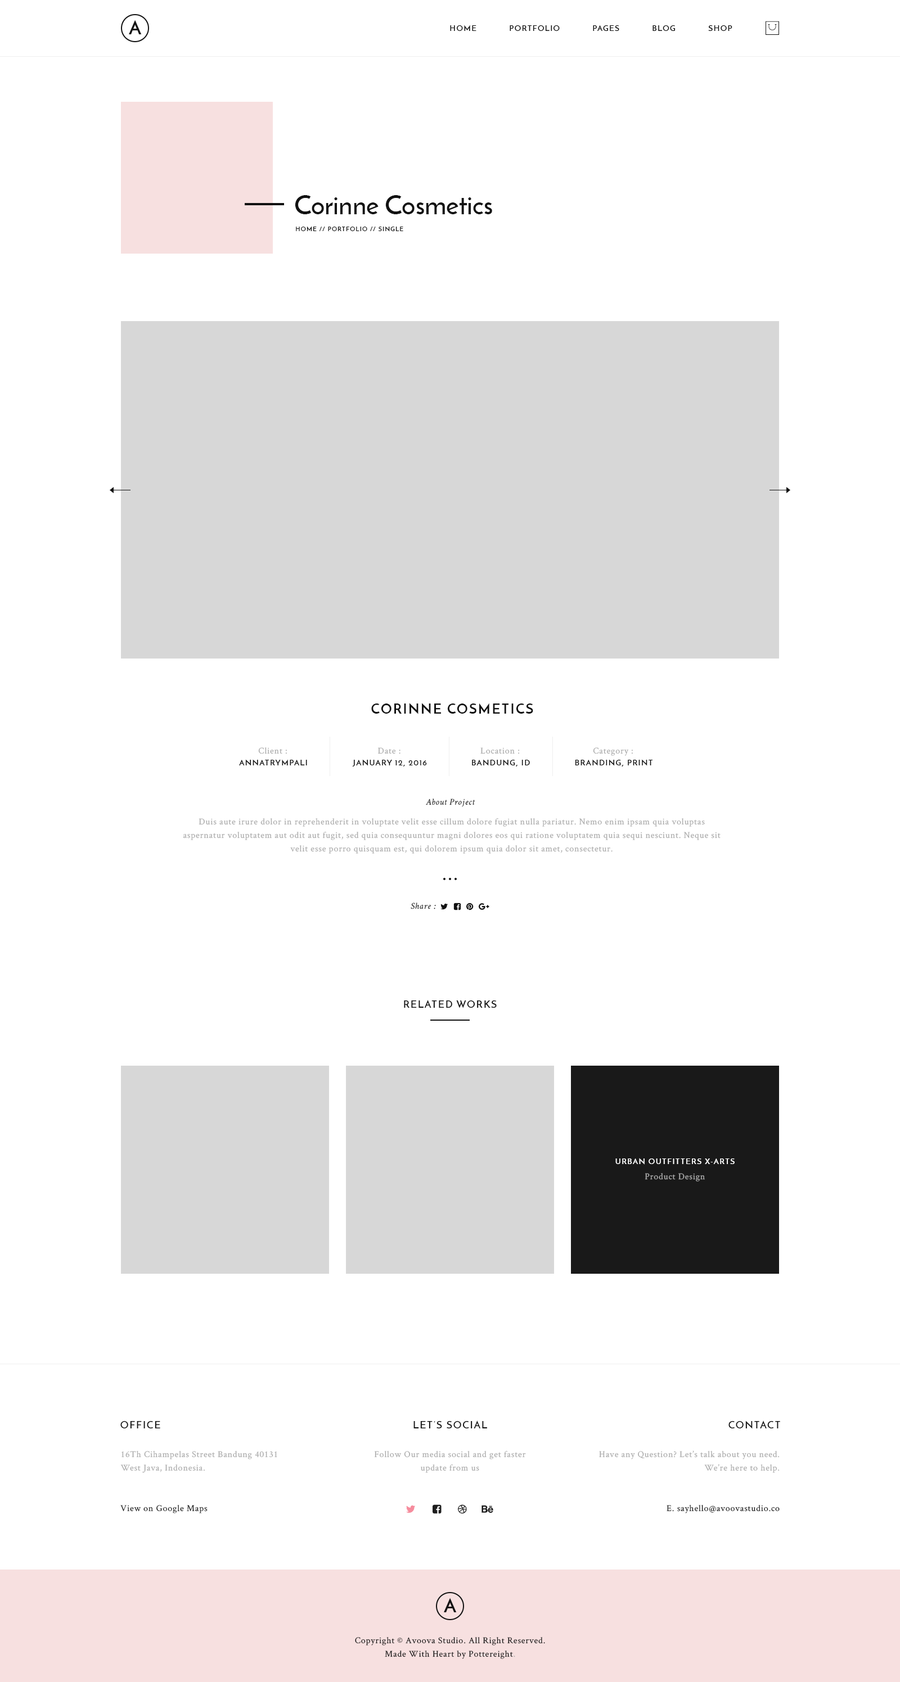
<style>
.page{position:relative;width:900px;height:1682px;background:#ffffff}
.page>*{position:absolute;margin:0}
.t1{font:19.1px "JosefinSans-Bold";letter-spacing:0.5em;color:#121212;text-transform:uppercase}
.t2{font:7.9px "JosefinSans-SemiBold";letter-spacing:0.1em;color:#121212;text-transform:uppercase}
.t3{font:27px "JosefinSans-SemiBold";color:#121212}
.t4{font:6.2px "JosefinSans-SemiBold";letter-spacing:0.1em;color:#121212;text-transform:uppercase}
.t5{font:13.5px "JosefinSans-Bold";letter-spacing:0.1em;color:#121212;text-transform:uppercase}
.t6{font:9px "CrimsonText-Roman";letter-spacing:0.05em;color:#ababab}
.t7{font:9px "CrimsonText-Italic";letter-spacing:0.05em;color:#121212}
.t8{font:9px/13.5px "CrimsonText-Roman";letter-spacing:0.05em;color:#ababab}
.t9{font:10.1px "JosefinSans-SemiBold";letter-spacing:0.1em;color:#121212;text-transform:uppercase}
.t10{font:7.9px "JosefinSans-SemiBold";letter-spacing:0.1em;color:#ffffff;text-transform:uppercase}
.t11{font:9px "CrimsonText-Roman";letter-spacing:0.05em;color:#121212}
.t12{font:9px/13.5px "CrimsonText-Roman";letter-spacing:0.05em;color:#121212}
</style>
<div class="page">
<p class="t1" style="left:129px;top:20px;width:13px;height:14px">a</p>
<p class="t2" style="left:450px;top:25px;width:26px;height:6px">Home</p>
<p class="t2" style="left:510px;top:25px;width:50px;height:6px">Portfolio</p>
<p class="t2" style="left:593px;top:25px;width:26px;height:6px">Pages</p>
<p class="t2" style="left:652px;top:25px;width:23px;height:6px">Blog</p>
<p class="t2" style="left:708px;top:25px;width:24px;height:6px">Shop</p>
<p class="t3" style="left:295px;top:195px;width:197px;height:19px">Corinne Cosmetics</p>
<p class="t4" style="left:296px;top:226px;width:107px;height:6px">Home // Portfolio // Single</p>
<p class="t5" style="left:371px;top:703px;width:162px;height:11px">Corinne Cosmetics</p>
<p class="t6" style="left:258px;top:748px;width:29px;height:6px">Client :</p>
<p class="t6" style="left:377px;top:748px;width:23px;height:6px">Date :</p>
<p class="t6" style="left:480px;top:748px;width:40px;height:6px">Location :</p>
<p class="t6" style="left:593px;top:748px;width:40px;height:8px">Category :</p>
<p class="t2" style="left:239px;top:759px;width:68px;height:7px">Annatrympali</p>
<p class="t2" style="left:352px;top:759px;width:75px;height:8px">January 12, 2016</p>
<p class="t2" style="left:472px;top:759px;width:58px;height:8px">Bandung, Id</p>
<p class="t2" style="left:575px;top:759px;width:77px;height:8px">Branding, Print</p>
<p class="t7" style="left:426px;top:799px;width:49px;height:8px">About Project</p>
<p class="t8" style="left:183px;top:818px;width:538px;height:36px;text-align:center">Duis aute irure dolor in reprehenderit in voluptate velit esse cillum dolore fugiat nulla pariatur. Nemo enim ipsam quia voluptas aspernatur voluptatem aut odit aut fugit, sed quia consequuntur magni dolores eos qui ratione voluptatem quia sequi nesciunt. Neque sit velit esse porro quisquam est, qui dolorem ipsum quia dolor sit amet, consectetur.</p>
<p class="t7" style="left:411px;top:903px;width:25px;height:7px">Share :</p>
<p class="t9" style="left:404px;top:1000px;width:93px;height:9px">Related Works</p>
<p class="t10" style="left:615px;top:1158px;width:120px;height:7px">Urban Outfitters X-Arts</p>
<p class="t6" style="left:645px;top:1173px;width:60px;height:9px">Product Design</p>
<p class="t9" style="left:120px;top:1421px;width:40px;height:8px">Office</p>
<p class="t9" style="left:413px;top:1421px;width:74px;height:8px">Let’s Social</p>
<p class="t9" style="left:728px;top:1421px;width:52px;height:8px">Contact</p>
<p class="t8" style="left:120px;top:1451px;width:157px;height:22px">16Th Cihampelas Street Bandung 40131<br>West Java, Indonesia.</p>
<p class="t8" style="left:374px;top:1451px;width:152px;height:22px;text-align:center">Follow Our media social and get faster<br>update from us</p>
<p class="t8" style="left:599px;top:1451px;width:181px;height:22px;text-align:right">Have any Question? Let’s talk about you need.<br>We’re here to help.</p>
<p class="t11" style="left:120px;top:1505px;width:88px;height:9px">View on Google Maps</p>
<p class="t11" style="left:667px;top:1505px;width:113px;height:9px">E. sayhello@avoovastudio.co</p>
<p class="t1" style="left:444px;top:1598px;width:13px;height:15px">a</p>
<p class="t12" style="left:355px;top:1637px;width:190px;height:22px;text-align:center">Copyright © Avoova Studio. All Right Reserved.<br>Made With Heart by Pottereight<span class="t8">.</span></p>
</div>
